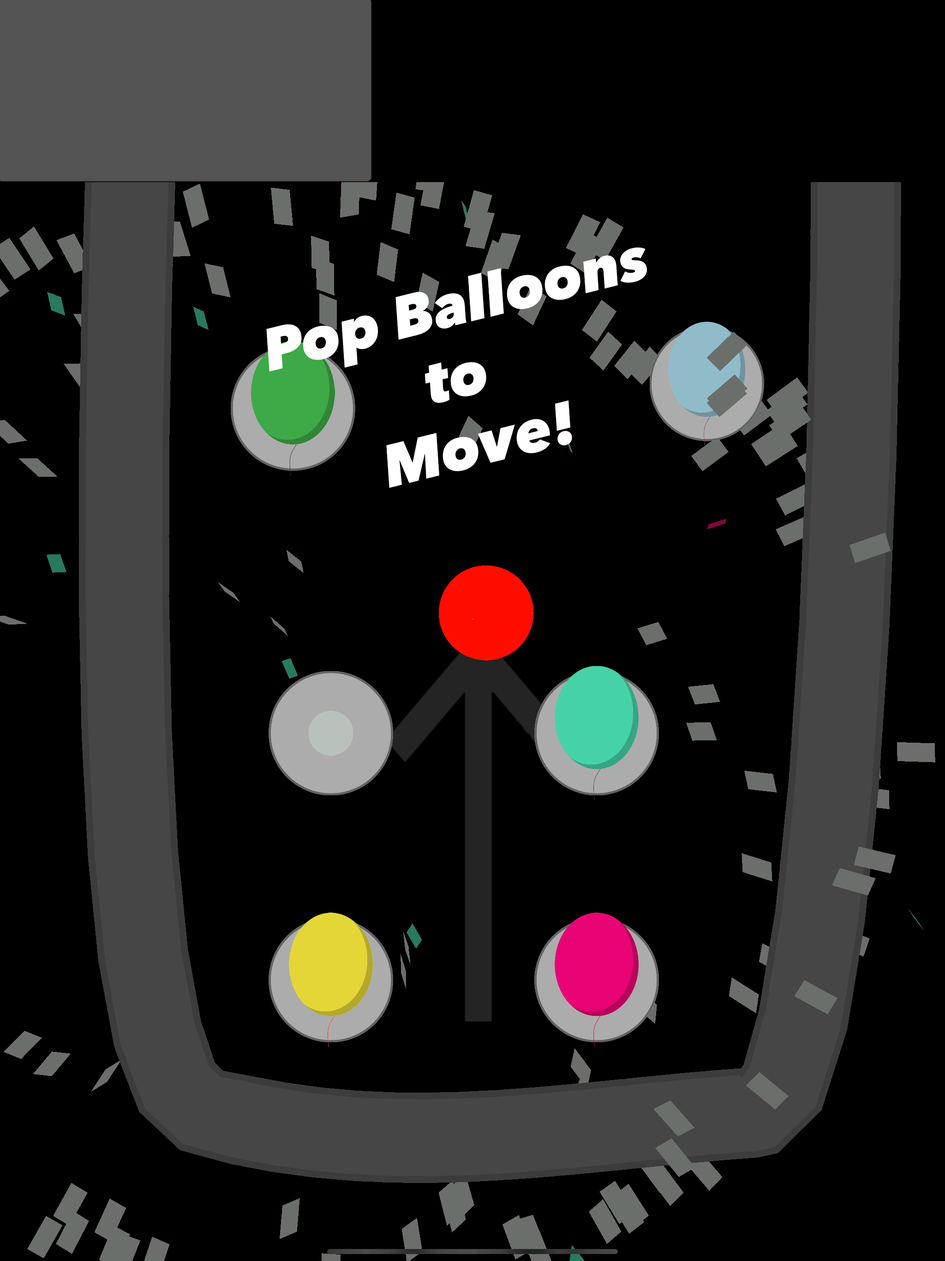
<style>
.page{position:relative;width:945px;height:1261px;background:#000000}
.page>*{position:absolute;margin:0}
.t1{font:59.1px "AvenirNext-HeavyItalic";color:#ffffff}
</style>
<div class="page">
<p class="t1" style="left:266px;top:247px;width:381px;height:241px;rotate:-14deg">Pop Balloons <br>         to<br>      Move!</p>
</div>
